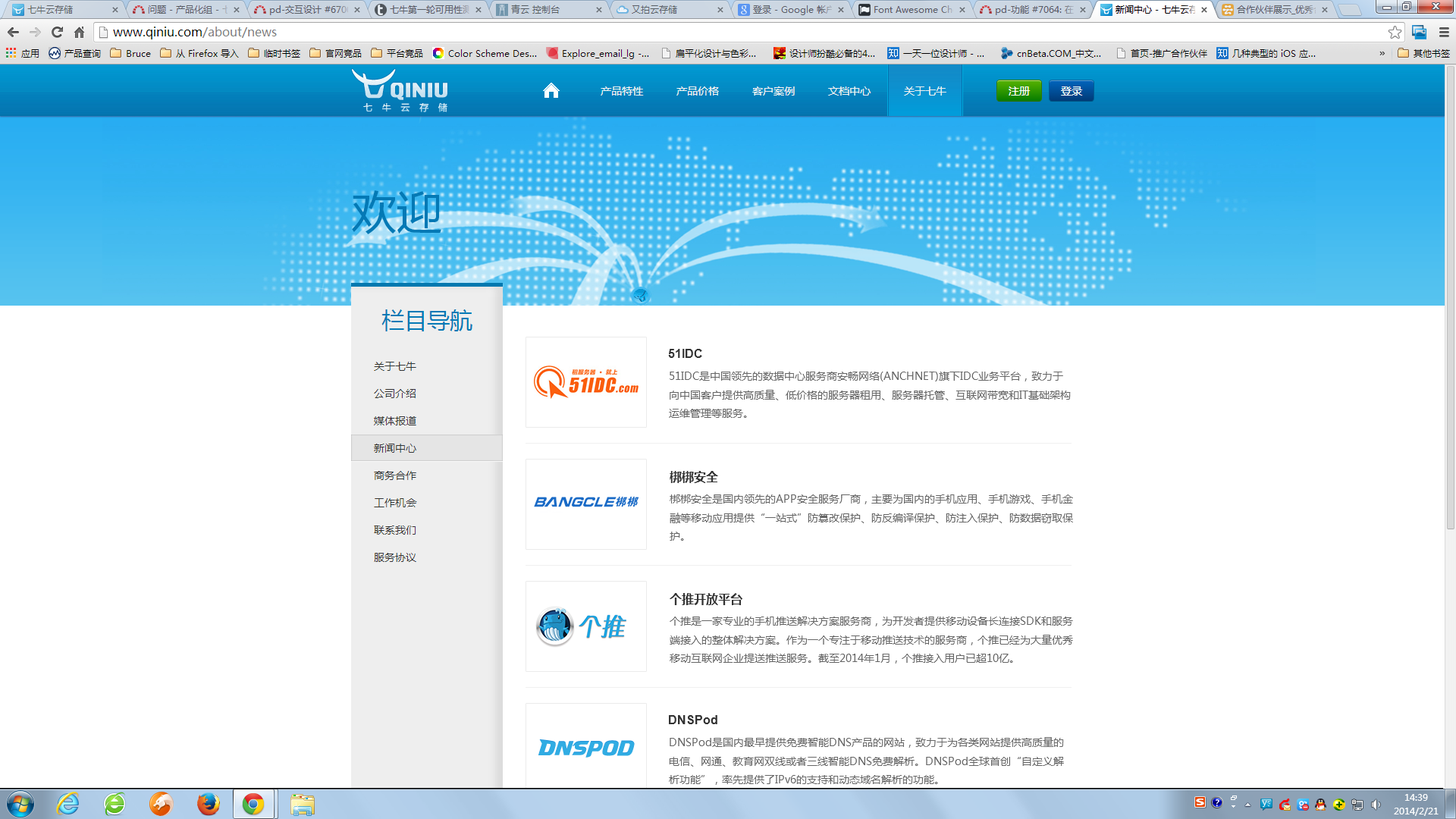
<style>
.page{position:relative;width:1456px;height:819px;background:#ffffff}
.page>*{position:absolute;margin:0}
.t1{font:12.1px "Arial-BoldMT";color:#333333}
.t2{font:10.6px "MicrosoftYaHei";color:#666666}
.t3{font:12.1px "MicrosoftYaHei-Bold";color:#333333}
</style>
<div class="page">
<p class="t1" style="left:668px;top:349px;width:34px;height:9px">51IDC</p>
<p class="t2" style="left:669px;top:372px;width:402px;height:46px">51IDC是中国领先的数据中心服务商安畅网络(ANCHNET)旗下IDC业务平台，致力于向中国客户提供高质量、低价格的服务器租用、服务器托管、互联网带宽和IT基础架构运维管理等服务。</p>
<p class="t3" style="left:670px;top:471px;width:48px;height:12px">梆梆安全</p>
<p class="t2" style="left:670px;top:494px;width:403px;height:47px">梆梆安全是国内领先的APP安全服务厂商，主要为国内的手机应用、手机游戏、手机金融等移动应用提供“一站式”防篡改保护、防反编译保护、防注入保护、防数据窃取保护。</p>
<p class="t3" style="left:670px;top:593px;width:72px;height:12px">个推开放平台</p>
<p class="t2" style="left:670px;top:617px;width:403px;height:47px">个推是一家专业的手机推送解决方案服务商，为开发者提供移动设备长连接SDK和服务端接入的整体解决方案。作为一个专注于移动推送技术的服务商，个推已经为大量优秀移动互联网企业提送推送服务。截至2014年1月，个推接入用户已超10亿。</p>
<p class="t1" style="left:669px;top:715px;width:48px;height:9px">DNSPod</p>
<p class="t2" style="left:669px;top:737px;width:395px;height:48px">DNSPod是国内最早提供免费智能DNS产品的网站，致力于为各类网站提供高质量的电信、网通、教育网双线或者三线智能DNS免费解析。DNSPod全球首创“自定义解析功能”，率先提供了IPv6的支持和动态域名解析的功能。</p>
</div>
